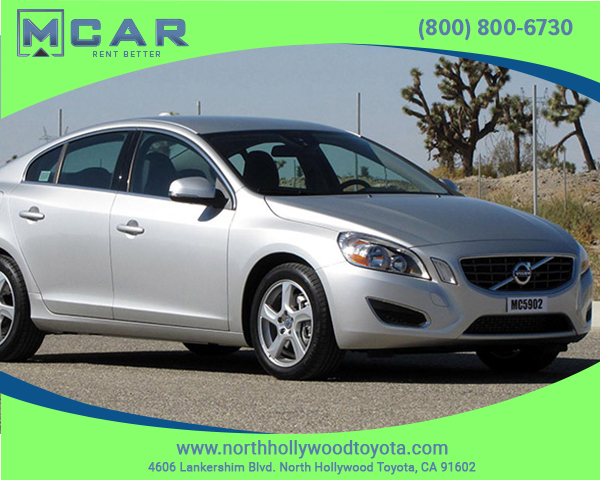
<style>
.page{position:relative;width:600px;height:480px;background:#87ff6b}
.page>*{position:absolute;margin:0}
.t1{font:24px "ProximaNovaCond-Semibold";color:#5a7ca8;font-weight:bold}
.t2{font:18px "Roboto-Regular";color:#5a7ca8;font-weight:bold}
.t3{font:12px "Roboto-Regular";color:#5a7ca8;font-weight:bold}
</style>
<div class="page">
<p class="t1" style="left:419px;top:18px;width:154px;height:23px">(800) 800-6730</p>
<p class="t2" style="left:176px;top:440px;width:272px;height:19px">www.northhollywoodtoyota.com</p>
<p class="t3" style="left:148px;top:462px;width:328px;height:13px">4606 Lankershim Blvd. North Hollywood Toyota, CA 91602</p>
</div>
